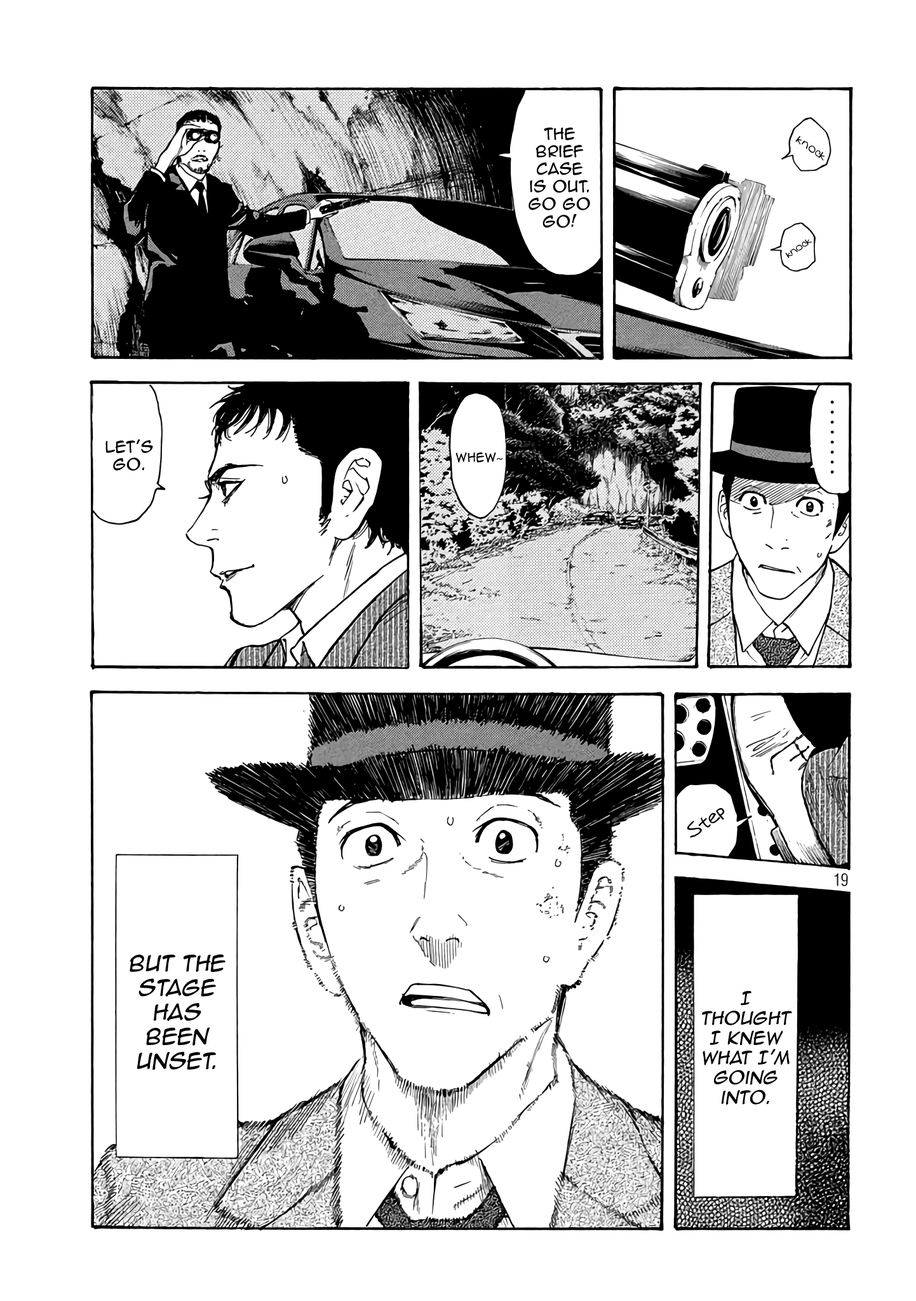
<style>
.page{position:relative;width:916px;height:1301px;background:#ffffff}
.page>*{position:absolute;margin:0}
.t1{font:14.6px "AnimeAce2.0BB";color:#000000}
.t2{font:11.4px "Augie";color:#000000}
.t3{font:10.2px "Augie";color:#000000}
.t4{font:11.4px "AnimeAce2.0BB";color:#000000}
.t5{font:11.4px "MyriadPro-Regular";color:#000000}
.t6{font:18.4px "Augie";color:#000000}
.t7{font:20.3px "AnimeAce2.0BB";color:#000000;font-style:italic}
.t8{font:16.5px "AnimeAce2.0BB";color:#000000;font-style:italic}
</style>
<div class="page">
<p class="t1" style="left:529px;top:127px;width:61px;height:101px;text-align:center">The brief case is out. Go go go!</p>
<p class="t2" style="left:796px;top:136px;width:29px;height:25px;rotate:35deg">knock</p>
<p class="t3" style="left:785px;top:240px;width:28px;height:19px;rotate:-34deg">knock</p>
<p class="t1" style="left:105px;top:439px;width:48px;height:32px;text-align:center">Let’s go.</p>
<p class="t4" style="left:456px;top:452px;width:47px;height:11px">Whew<span class="t5">~</span></p>
<p class="t6" style="left:687px;top:808px;width:38px;height:30px;rotate:-34deg">Step</p>
<p class="t7" style="left:130px;top:954px;width:96px;height:117px;text-align:center">But the stage has been unset.</p>
<p class="t8" style="left:702px;top:991px;width:90px;height:114px;text-align:center">I thought I knew what I’m going into.</p>
</div>
